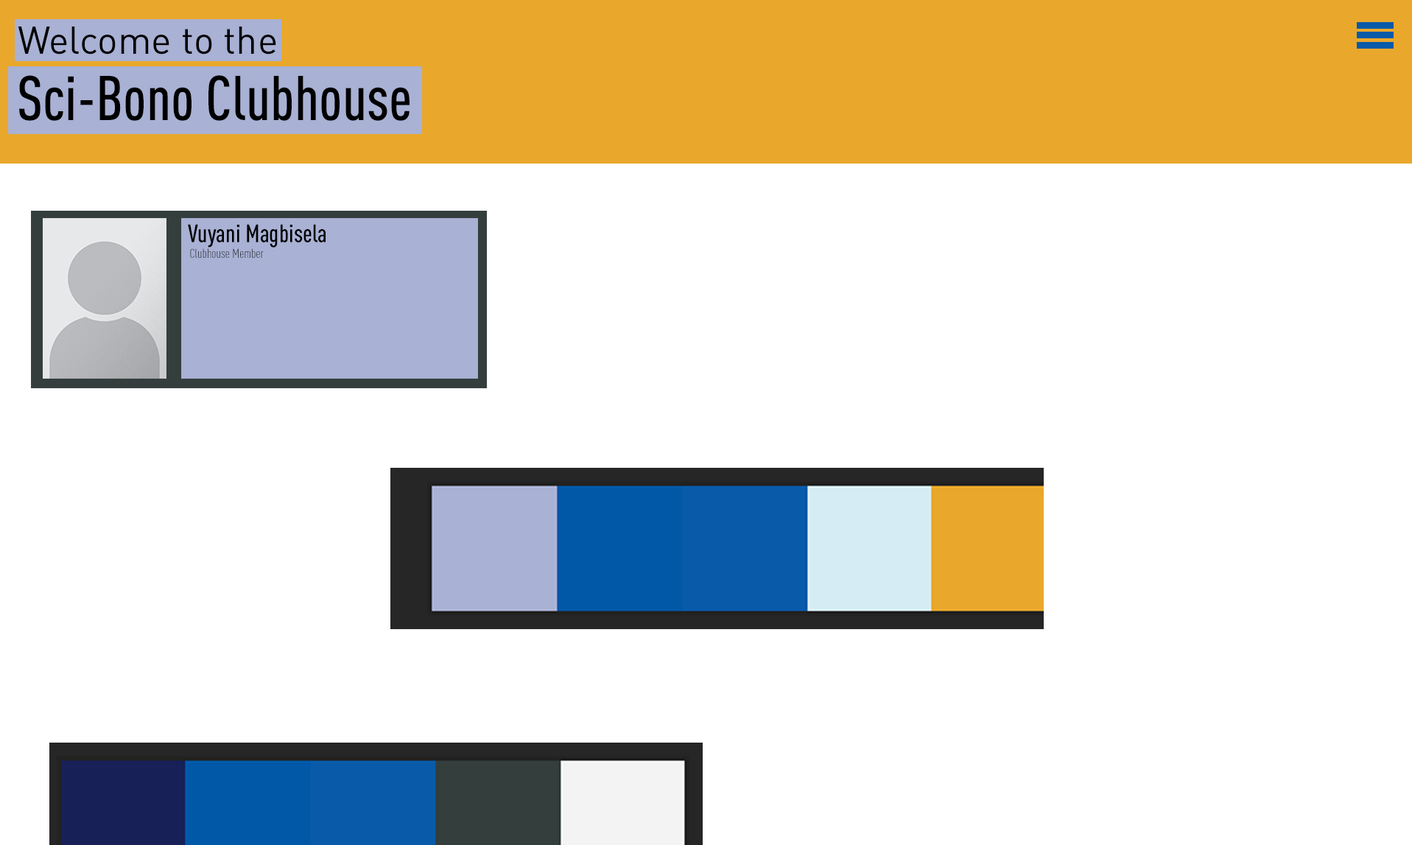
<style>
.page{position:relative;width:1412px;height:845px;background:#ffffff}
.page>*{position:absolute;margin:0}
.t1{font:38.3px "DINPro-Regular";color:#000000}
.t2{font:62px "DINPro-CondMedium";color:#000000}
.t3{font:25.2px "DINPro-CondMedium";color:#000000}
.t4{font:12.6px "DINPro-CondLight";scale:1.06 1}
</style>
<div class="page">
<p class="t1" style="left:18px;top:27px;width:258px;height:27px">Welcome to the</p>
<p class="t2" style="left:19px;top:75px;width:390px;height:46px">Sci-Bono Clubhouse</p>
<p class="t3" style="left:188px;top:224px;width:137px;height:23px">Vuyani Magbisela</p>
<p class="t4" style="left:190px;top:248px;width:74px;height:10px">Clubhouse Member</p>
</div>
